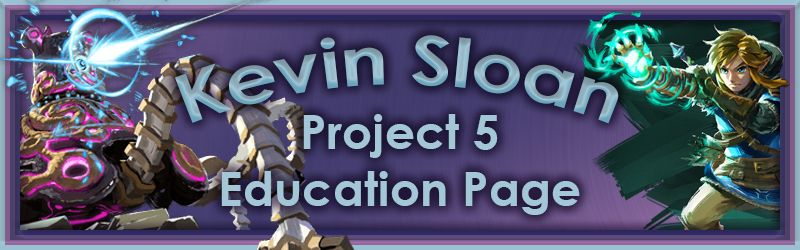
<style>
.page{position:relative;width:800px;height:250px}
.page>*{position:absolute;margin:0}
.t1{font:67.6px "CenturyGothic-Bold"}
.t2{font:47.5px "CenturyGothic-Bold";color:#a3c7d6}
</style>
<div class="page">
<p class="t1" style="left:175px;top:35px;width:444px;height:89px">Kevin Sloan</p>
<p class="t2" style="left:221px;top:114px;width:359px;height:101px;text-align:center">Project 5<br>Education Page</p>
</div>
